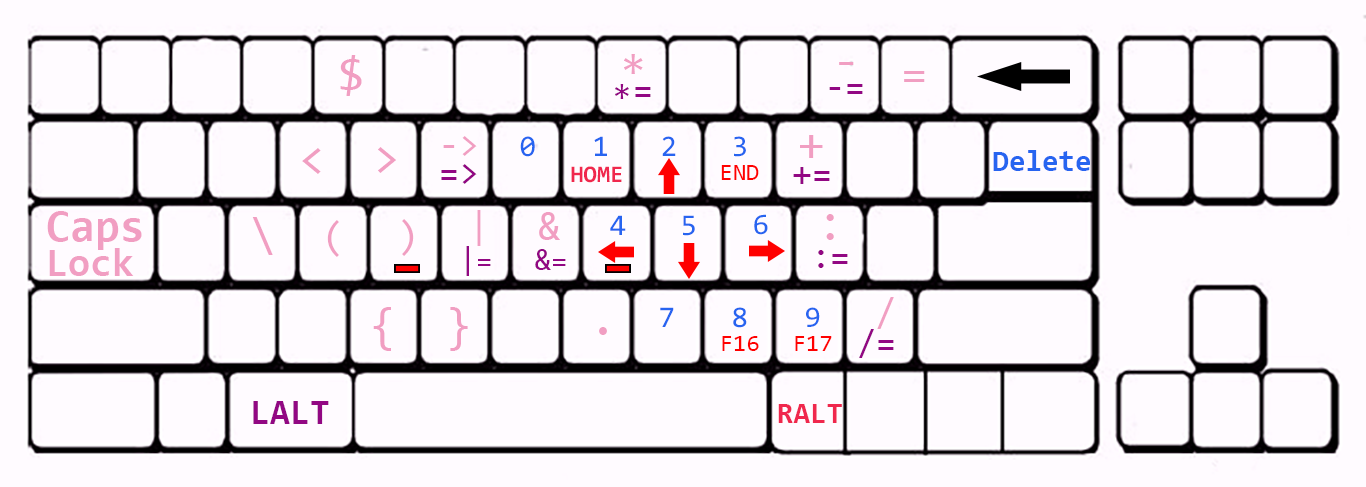
<style>
.page{position:relative;width:1366px;height:487px;background:#fffbff}
.page>*{position:absolute;margin:0}
.t1{font:48px "Consolas";color:#f19ec2}
.t2{font:36px "Consolas";color:#920783}
.t3{font:36px "Consolas";color:#f19ec2}
.t4{font:30px "Consolas";color:#2764f0}
.t5{font:30px "Consolas-Bold";color:#2764f0}
.t6{font:24px "Consolas-Bold";color:#f0274d}
.t7{font:24px "Consolas";color:#ff0000}
.t8{font:45px "Consolas-Bold";color:#f19ec2}
.t9{font:40px "Consolas";color:#f19ec2}
.t10{font:30px "Consolas";color:#920783}
.t11{font:40px "Consolas-Bold";color:#f19ec2}
.t12{font:36px "Consolas-Bold";color:#920783}
.t13{font:30px "Consolas-Bold";color:#f0274d}
</style>
<div class="page">
<p class="t1" style="left:624px;top:54px;width:19px;height:20px">*</p>
<p class="t1" style="left:340px;top:55px;width:22px;height:41px">$</p>
<p class="t1" style="left:839px;top:62px;width:15px;height:3px">-</p>
<p class="t1" style="left:904px;top:71px;width:21px;height:11px">=</p>
<p class="t2" style="left:615px;top:84px;width:14px;height:15px">*</p>
<p class="t2" style="left:635px;top:87px;width:16px;height:10px">=</p>
<p class="t2" style="left:829px;top:84px;width:34px;height:10px">-=</p>
<p class="t3" style="left:443px;top:136px;width:34px;height:20px">-&gt;</p>
<p class="t4" style="left:520px;top:136px;width:15px;height:21px">0</p>
<p class="t4" style="left:594px;top:136px;width:13px;height:20px">1</p>
<p class="t4" style="left:662px;top:136px;width:14px;height:20px">2</p>
<p class="t4" style="left:734px;top:136px;width:12px;height:21px">3</p>
<p class="t1" style="left:800px;top:135px;width:23px;height:23px">+</p>
<p class="t1" style="left:302px;top:148px;width:19px;height:26px">&lt;</p>
<p class="t1" style="left:378px;top:147px;width:18px;height:26px">&gt;</p>
<p class="t5" style="left:993px;top:150px;width:97px;height:21px">Delete</p>
<p class="t2" style="left:441px;top:164px;width:36px;height:20px">=&gt;</p>
<p class="t6" style="left:571px;top:166px;width:51px;height:17px">HOME</p>
<p class="t7" style="left:721px;top:165px;width:38px;height:15px">END</p>
<p class="t2" style="left:793px;top:167px;width:37px;height:17px">+=</p>
<p class="t8" style="left:47px;top:211px;width:95px;height:39px">Caps</p>
<p class="t1" style="left:252px;top:217px;width:21px;height:38px">\</p>
<p class="t9" style="left:327px;top:220px;width:12px;height:37px">(</p>
<p class="t9" style="left:402px;top:219px;width:12px;height:37px">)</p>
<p class="t3" style="left:477px;top:210px;width:4px;height:36px">|</p>
<p class="t9" style="left:539px;top:212px;width:21px;height:28px">&amp;</p>
<p class="t4" style="left:610px;top:215px;width:16px;height:20px">4</p>
<p class="t4" style="left:683px;top:215px;width:12px;height:21px">5</p>
<p class="t4" style="left:754px;top:214px;width:14px;height:21px">6</p>
<p class="t1" style="left:826px;top:214px;width:8px;height:26px">:</p>
<p class="t10" style="left:466px;top:246px;width:25px;height:30px">|=</p>
<p class="t11" style="left:49px;top:248px;width:85px;height:28px">Lock</p>
<p class="t10" style="left:535px;top:249px;width:31px;height:21px">&amp;=</p>
<p class="t2" style="left:818px;top:250px;width:30px;height:18px">:=</p>
<p class="t9" style="left:877px;top:297px;width:17px;height:32px">/</p>
<p class="t1" style="left:373px;top:307px;width:18px;height:44px">{</p>
<p class="t1" style="left:450px;top:307px;width:18px;height:44px">}</p>
<p class="t4" style="left:660px;top:307px;width:14px;height:20px">7</p>
<p class="t4" style="left:733px;top:307px;width:14px;height:21px">8</p>
<p class="t4" style="left:806px;top:307px;width:14px;height:20px">9</p>
<p class="t1" style="left:599px;top:327px;width:8px;height:8px">.</p>
<p class="t2" style="left:859px;top:329px;width:35px;height:29px">/=</p>
<p class="t7" style="left:722px;top:336px;width:37px;height:15px">F16</p>
<p class="t7" style="left:795px;top:336px;width:37px;height:15px">F17</p>
<p class="t12" style="left:253px;top:401px;width:76px;height:23px">LALT</p>
<p class="t13" style="left:778px;top:404px;width:64px;height:19px">RALT</p>
</div>
